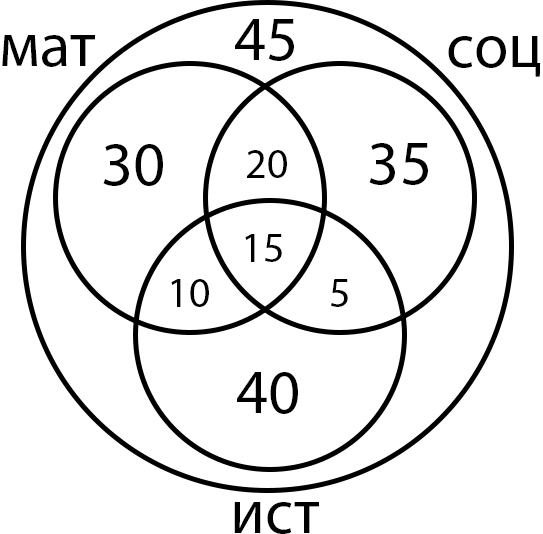
<style>
.page{position:relative;width:543px;height:534px;background:#ffffff}
.page>*{position:absolute;margin:0}
.t1{font:62.5px "MyriadPro-Regular";color:#000000}
.t2{font:41.7px "MyriadPro-Regular";color:#000000}
</style>
<div class="page">
<p class="t1" style="left:235px;top:19px;width:59px;height:42px">45</p>
<p class="t1" style="left:2px;top:35px;width:93px;height:32px">мат</p>
<p class="t1" style="left:448px;top:36px;width:93px;height:41px">соц</p>
<p class="t1" style="left:103px;top:144px;width:60px;height:42px">30</p>
<p class="t2" style="left:247px;top:150px;width:40px;height:28px">20</p>
<p class="t1" style="left:369px;top:143px;width:59px;height:42px">35</p>
<p class="t2" style="left:245px;top:234px;width:37px;height:28px">15</p>
<p class="t2" style="left:171px;top:279px;width:38px;height:28px">10</p>
<p class="t2" style="left:331px;top:279px;width:17px;height:28px">5</p>
<p class="t1" style="left:237px;top:372px;width:61px;height:42px">40</p>
<p class="t1" style="left:234px;top:502px;width:85px;height:32px">ист</p>
</div>
